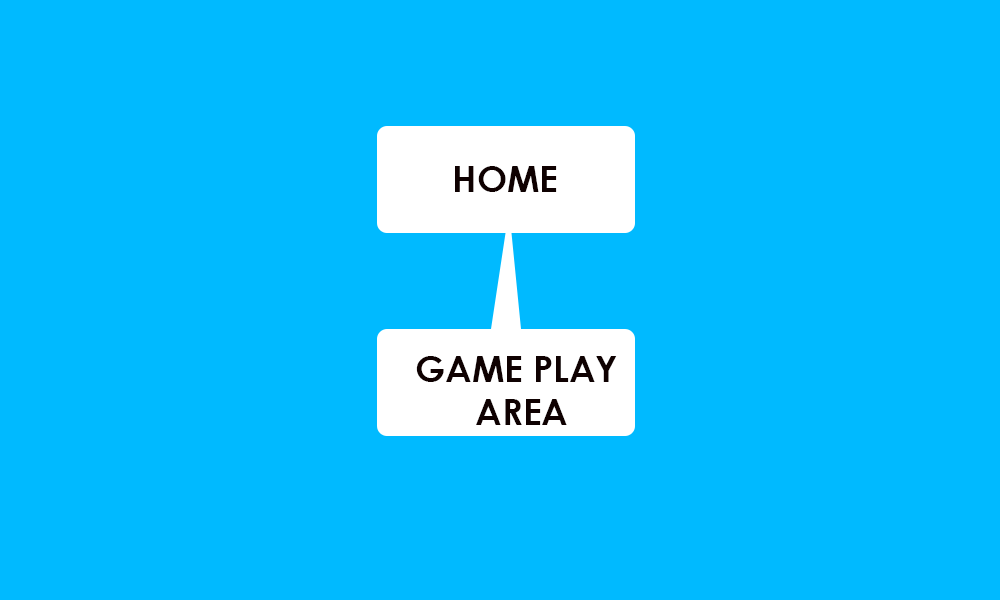
<style>
.page{position:relative;width:1000px;height:600px;background:#00baff}
.page>*{position:absolute;margin:0}
.t1{font:36px "CenturyGothic-Bold";color:#0f0101}
</style>
<div class="page">
<p class="t1" style="left:455px;top:166px;width:102px;height:26px">HOME</p>
<p class="t1" style="left:416px;top:356px;width:201px;height:69px">GAME PLAY<br>      AREA</p>
</div>
